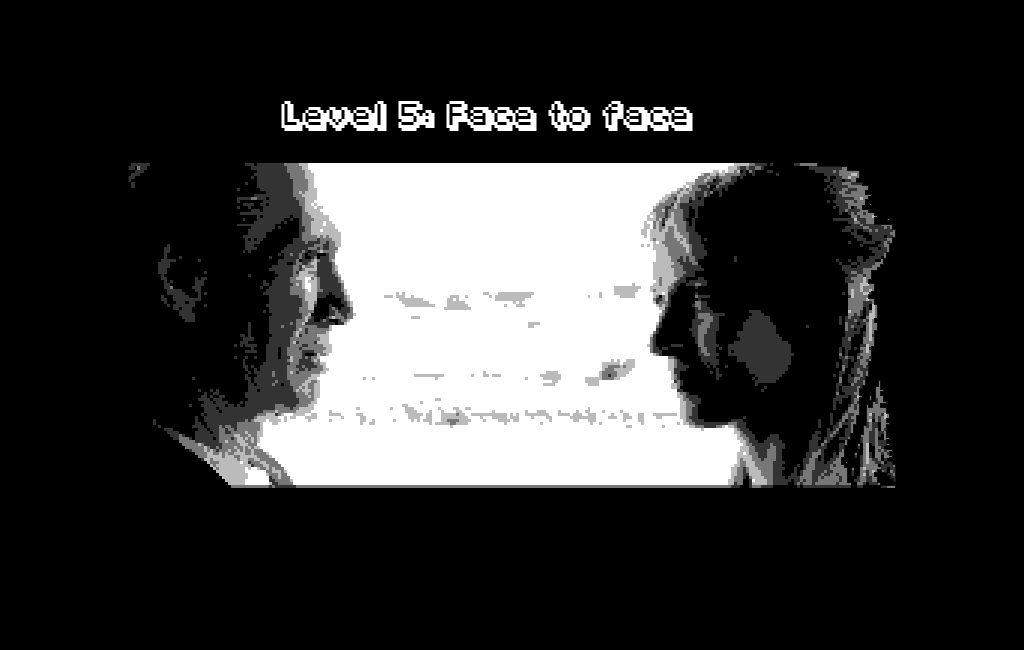
<style>
.page{position:relative;width:1024px;height:650px;background:#000000}
.page>*{position:absolute;margin:0}
.t1{font:24px "Fipps-Regular";color:#ffffff}
</style>
<div class="page">
<p class="t1" style="left:281px;top:101px;width:412px;height:30px">Level 5: Face to face</p>
</div>
